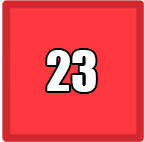
<style>
.page{position:relative;width:144px;height:142px;background:#ff3840}
.page>*{position:absolute;margin:0}
.t1{font:50px "Impact";color:#ffffff}
</style>
<div class="page">
<p class="t1" style="left:47px;top:50px;width:49px;height:42px">23</p>
</div>
